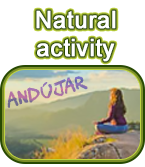
<style>
.page{position:relative;width:145px;height:167px;background:#ffffff}
.page>*{position:absolute;margin:0}
.t1{font:24px "ArialMT";color:#ffffff;font-weight:bold}
.t2{font:17.4px "CHAWP";font-weight:bold}
</style>
<div class="page">
<p class="t1" style="left:36px;top:10px;width:80px;height:52px;text-align:center">Natural<br>activity</p>
<p class="t2" style="left:7px;top:76px;width:81px;height:32px;rotate:-14deg">Andújar</p>
</div>
